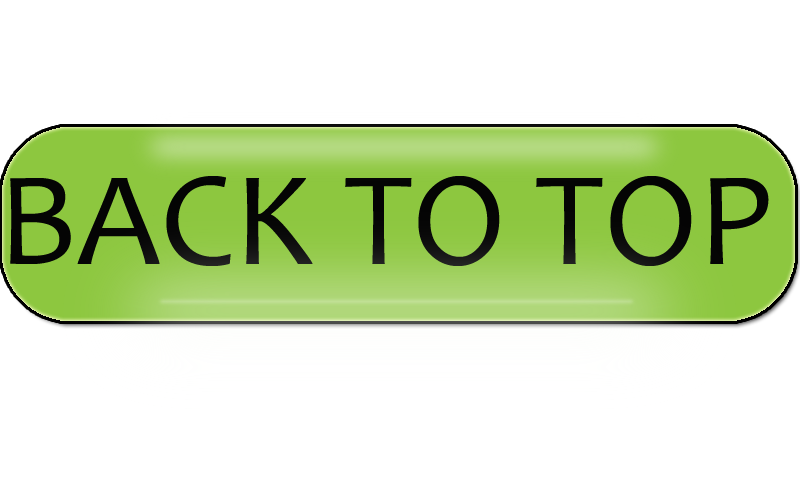
<style>
.page{position:relative;width:800px;height:480px;background:#ffffff}
.page>*{position:absolute;margin:0}
.t1{font:135px "Candara";color:#040404}
</style>
<div class="page">
<p class="t1" style="left:10px;top:176px;width:759px;height:90px">BACK TO TOP</p>
</div>
